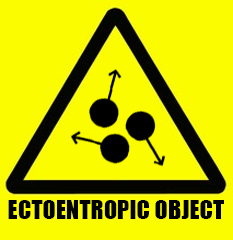
<style>
.page{position:relative;width:233px;height:240px;background:#fbfc00}
.page>*{position:absolute;margin:0}
.t1{font:24.5px "Impact";color:#000000;text-transform:uppercase}
</style>
<div class="page">
<p class="t1" style="left:8px;top:200px;width:216px;height:19px">ectoentropic object</p>
</div>
